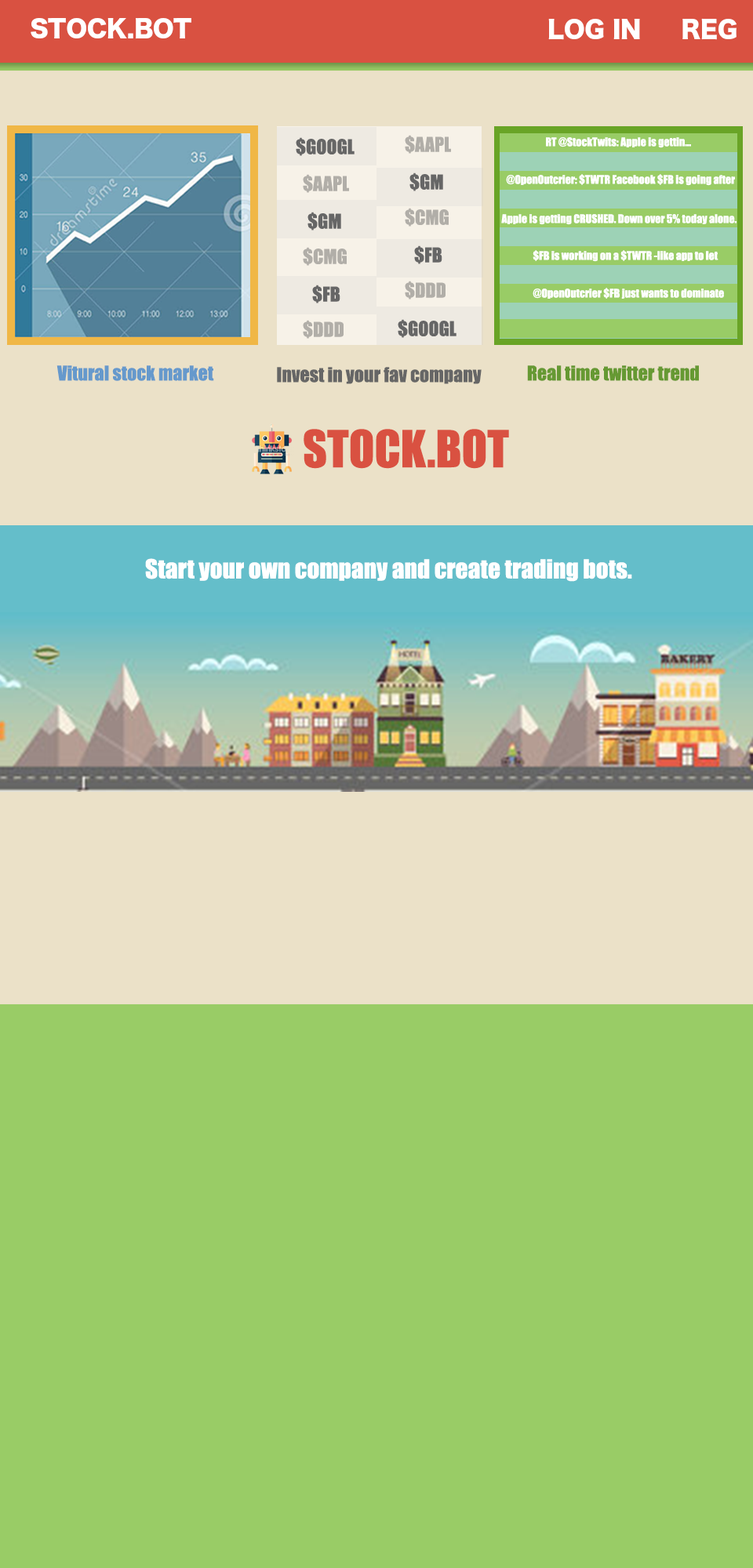
<style>
.page{position:relative;width:753px;height:1568px;background:#99cc66}
.page>*{position:absolute;margin:0}
.t1{font:23.5px "HiraKakuStd-W8";color:#ffffff}
.t2{font:18.8px "Impact";color:#666666}
.t3{font:18.8px "Impact";color:#b1aea8}
.t4{font:11px "Impact";color:#ffffff}
.t5{font:18.8px "Impact";color:#6699cc}
.t6{font:18.8px "Impact";color:#669933}
.t7{font:47.3px "Impact";color:#d95141}
.t8{font:24.3px "Impact";color:#ffffff}
</style>
<div class="page">
<p class="t1" style="left:31px;top:18px;width:160px;height:21px">STOCK.BOT</p>
<p class="t1" style="left:548px;top:19px;width:92px;height:21px">LOG IN</p>
<p class="t1" style="left:682px;top:18px;width:54px;height:22px">REG</p>
<p class="t2" style="left:296px;top:137px;width:58px;height:19px">$GOOGL</p>
<p class="t3" style="left:405px;top:135px;width:46px;height:19px">$AAPL</p>
<p class="t4" style="left:546px;top:137px;width:145px;height:11px">RT @StockTwits: Apple is gettin...</p>
<p class="t2" style="left:409px;top:172px;width:34px;height:19px">$GM</p>
<p class="t3" style="left:303px;top:174px;width:46px;height:19px">$AAPL</p>
<p class="t4" style="left:506px;top:174px;width:229px;height:12px">@OpenOutcrier: $TWTR Facebook $FB is going after</p>
<p class="t3" style="left:405px;top:208px;width:43px;height:19px">$CMG</p>
<p class="t2" style="left:307px;top:212px;width:34px;height:18px">$GM</p>
<p class="t4" style="left:501px;top:214px;width:235px;height:11px">Apple is getting CRUSHED. Down over 5% today alone.</p>
<p class="t2" style="left:414px;top:245px;width:28px;height:19px">$FB</p>
<p class="t3" style="left:303px;top:247px;width:44px;height:19px">$CMG</p>
<p class="t4" style="left:532px;top:250px;width:186px;height:12px">$FB is working on a $TWTR -like app to let</p>
<p class="t3" style="left:405px;top:281px;width:40px;height:18px">$DDD</p>
<p class="t2" style="left:312px;top:285px;width:28px;height:18px">$FB</p>
<p class="t4" style="left:532px;top:288px;width:192px;height:11px">@OpenOutcrier $FB just wants to dominate</p>
<p class="t3" style="left:303px;top:320px;width:40px;height:19px">$DDD</p>
<p class="t2" style="left:397px;top:319px;width:59px;height:19px">$GOOGL</p>
<p class="t5" style="left:56px;top:365px;width:158px;height:16px">Vitural stock market</p>
<p class="t6" style="left:527px;top:365px;width:172px;height:16px">Real time twitter trend</p>
<p class="t2" style="left:277px;top:367px;width:204px;height:17px">Invest in your fav company</p>
<p class="t7" style="left:303px;top:429px;width:206px;height:40px">STOCK.BOT</p>
<p class="t8" style="left:145px;top:558px;width:487px;height:24px">Start your own company and create trading bots.</p>
</div>
